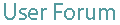
<style>
.page{position:relative;width:120px;height:25px;background:#ffffff}
.page>*{position:absolute;margin:0}
.t1{font:24px "MyriadPro-Regular";color:#539a9e}
</style>
<div class="page">
<p class="t1" style="left:4px;top:3px;width:111px;height:17px">User Forum</p>
</div>
